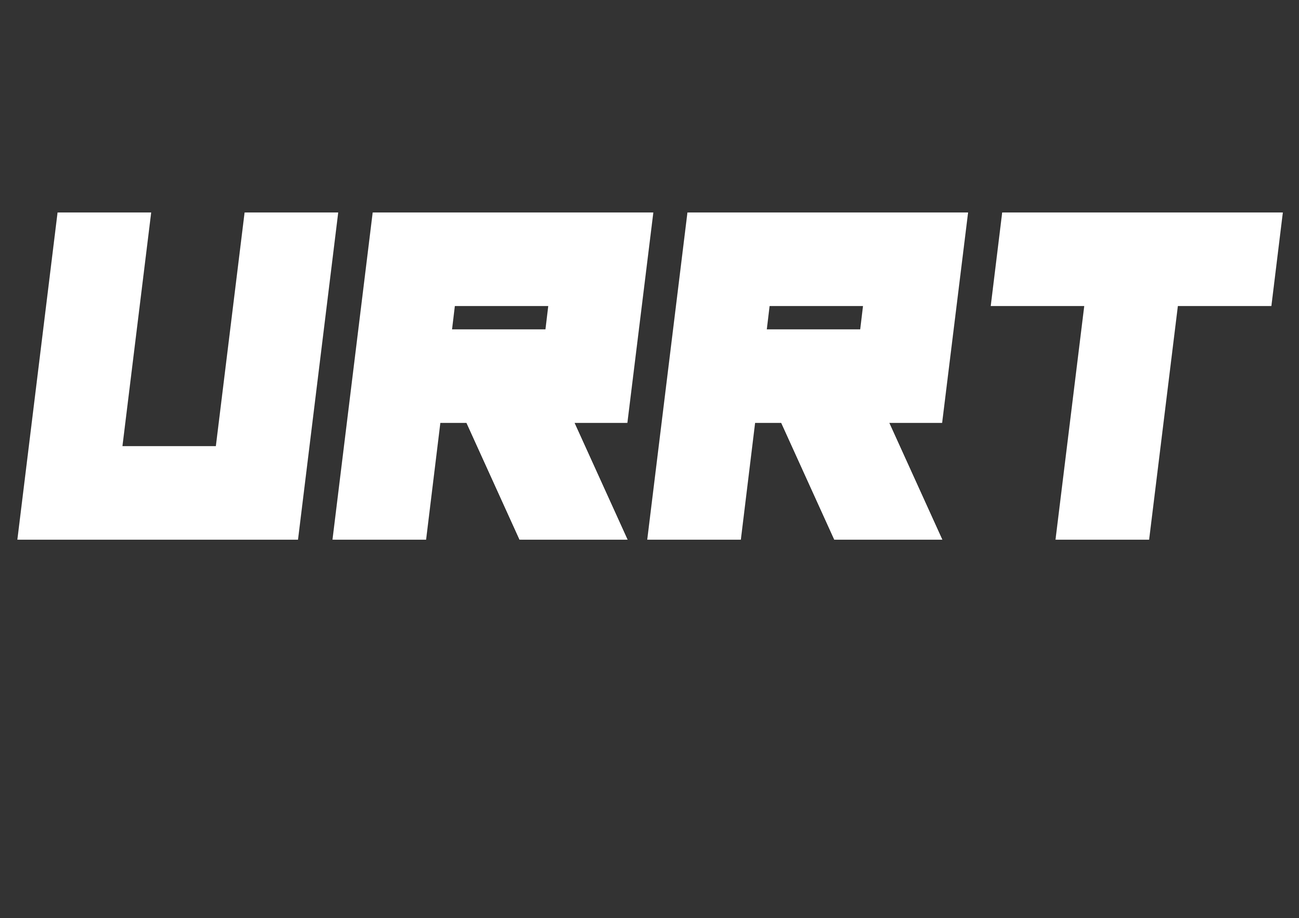
<style>
.page{position:relative;width:1299px;height:918px;background:#333333}
.page>*{position:absolute;margin:0}
.t1{font:478.7px "NauSea";letter-spacing:0.02em;color:#ffffff}
</style>
<div class="page">
<p class="t1" style="left:17px;top:213px;width:1266px;height:327px">URRT</p>
</div>
